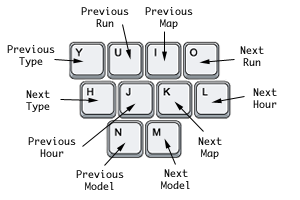
<style>
.page{position:relative;width:300px;height:200px;background:#ffffff}
.page>*{position:absolute;margin:0}
.t1{font:10px "Monaco";color:#000000}
</style>
<div class="page">
<p class="t1" style="left:81px;top:7px;width:48px;height:20px;text-align:center">Previous<br>Run</p>
<p class="t1" style="left:145px;top:7px;width:48px;height:22px;text-align:center">Previous<br>Map</p>
<p class="t1" style="left:7px;top:45px;width:48px;height:22px;text-align:center">Previous<br>Type</p>
<p class="t1" style="left:240px;top:46px;width:24px;height:20px;text-align:center">Next<br>Run</p>
<p class="t1" style="left:253px;top:88px;width:24px;height:20px;text-align:center">Next<br>Hour</p>
<p class="t1" style="left:26px;top:90px;width:24px;height:22px;text-align:center">Next<br>Type</p>
<p class="t1" style="left:28px;top:137px;width:48px;height:20px;text-align:center">Previous<br>Hour</p>
<p class="t1" style="left:198px;top:137px;width:24px;height:22px;text-align:center">Next<br>Map</p>
<p class="t1" style="left:76px;top:170px;width:48px;height:20px;text-align:center">Previous<br>Model</p>
<p class="t1" style="left:161px;top:169px;width:29px;height:20px;text-align:center">Next<br>Model</p>
</div>
